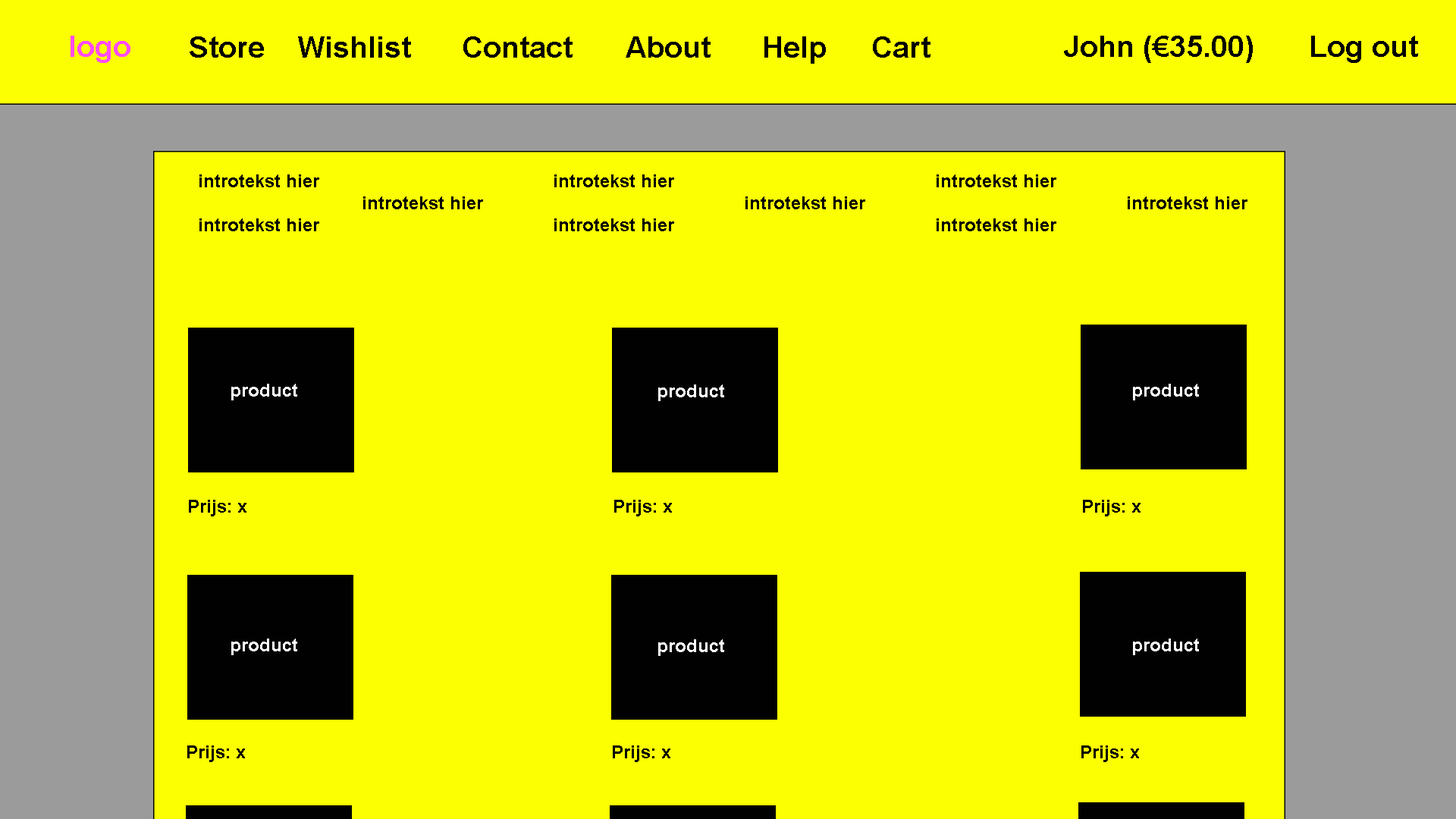
<style>
.page{position:relative;width:1456px;height:819px;background:#fbff02}
.page>*{position:absolute;margin:0}
.t1{font:29.6px "Arial-BoldMT";color:#ff4cff}
.t2{font:29.6px "Arial-BoldMT";color:#000000}
.t3{font:29.6px "Arial-BoldMT";color:#010101}
.t4{font:18.2px "Arial-BoldMT";color:#000000}
.t5{font:18.2px "Arial-BoldMT";color:#ffffff}
.t6{font:18.2px "Arial-BoldMT";color:#010101}
</style>
<div class="page">
<p class="t1" style="left:71px;top:36px;width:59px;height:27px">logo</p>
<p class="t2" style="left:190px;top:36px;width:740px;height:28px">Store  Wishlist  Contact  About  Help  Cart</p>
<p class="t3" style="left:1064px;top:36px;width:354px;height:27px">John (€35.00)  Log out</p>
<p class="t4" style="left:199px;top:174px;width:1048px;height:57px">introtekst hier         introtekst hier          introtekst hier<br>      introtekst hier          introtekst hier          introtekst hier<br>introtekst hier         introtekst hier          introtekst hier</p>
<p class="t5" style="left:231px;top:384px;width:66px;height:16px">product</p>
<p class="t5" style="left:658px;top:384px;width:66px;height:17px">product</p>
<p class="t5" style="left:1133px;top:384px;width:66px;height:16px">product</p>
<p class="t6" style="left:189px;top:500px;width:57px;height:16px">Prijs: x</p>
<p class="t6" style="left:614px;top:500px;width:58px;height:16px">Prijs: x</p>
<p class="t6" style="left:1083px;top:500px;width:58px;height:16px">Prijs: x</p>
<p class="t5" style="left:231px;top:639px;width:66px;height:16px">product</p>
<p class="t5" style="left:658px;top:639px;width:66px;height:17px">product</p>
<p class="t5" style="left:1133px;top:639px;width:66px;height:16px">product</p>
<p class="t6" style="left:187px;top:745px;width:58px;height:17px">Prijs: x</p>
<p class="t6" style="left:613px;top:745px;width:57px;height:17px">Prijs: x</p>
<p class="t6" style="left:1081px;top:745px;width:58px;height:17px">Prijs: x</p>
</div>
